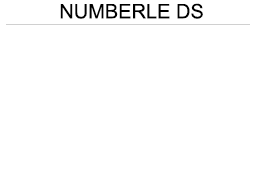
<style>
.page{position:relative;width:256px;height:192px;background:#ffffff}
.page>*{position:absolute;margin:0}
.t1{font:20px "ArialMT";color:#000000}
</style>
<div class="page">
<p class="t1" style="left:60px;top:3px;width:143px;height:16px">NUMBERLE DS</p>
</div>
